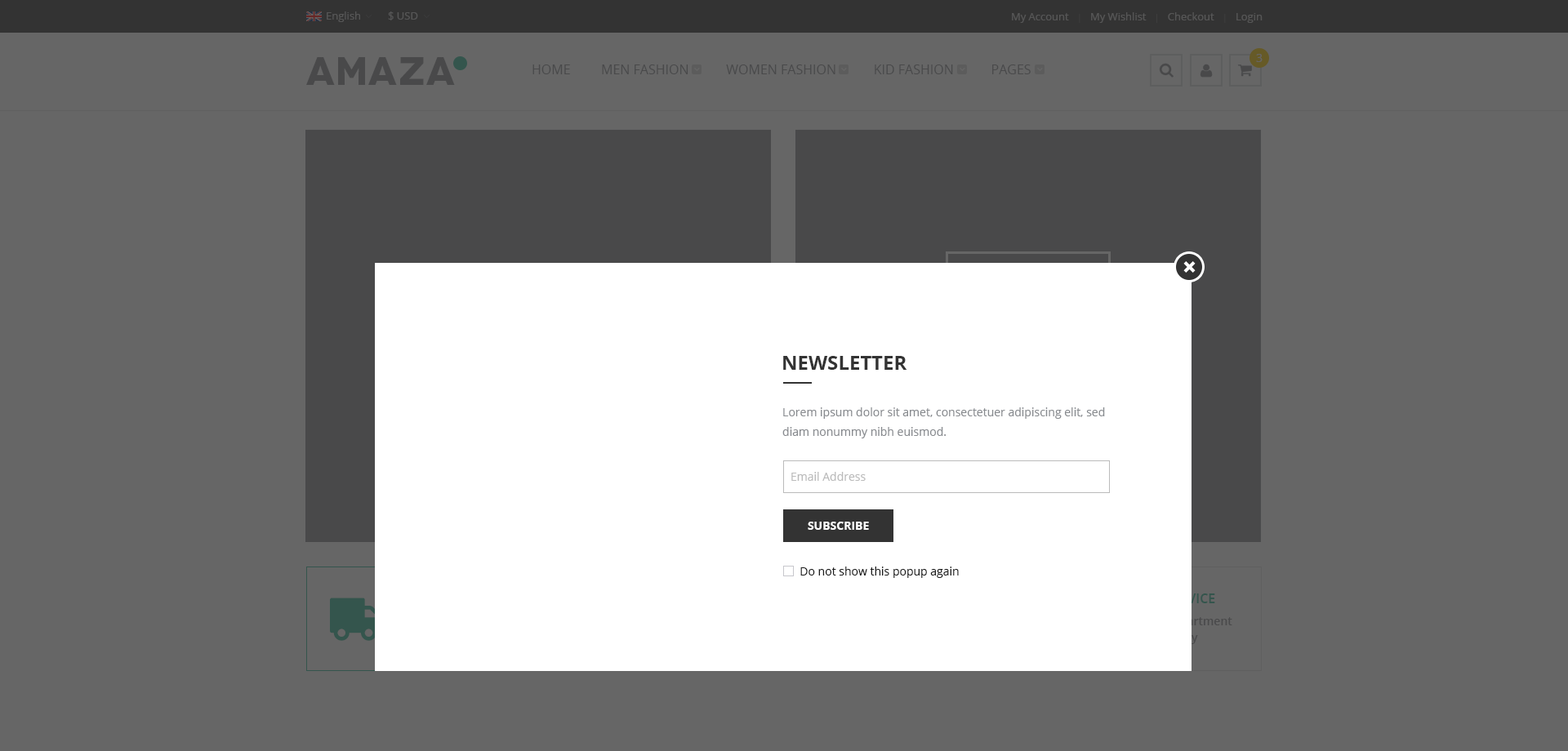
<style>
.page{position:relative;width:1568px;height:751px;background:#666666}
.page>*{position:absolute;margin:0}
.t1{font:10.6px "OpenSans";color:#565656}
.t2{font:10.6px "OpenSans";color:#bebebf}
.t3{font:9px "OpenSans";color:#595959}
.t4{font:11.4px "OpenSans";letter-spacing:0.025em;color:#666666;text-transform:uppercase}
.t5{font:39.2px "Novecentowide-Bold";letter-spacing:0.025em;color:#49494a;text-transform:uppercase}
.t6{font:13.1px "OpenSans";color:#49494a;text-transform:uppercase}
.t7{font:19.6px "OpenSans-Bold";color:#333333;text-transform:uppercase}
.t8{font:11.4px/19.6px "OpenSans";color:#898c90}
.t9{font:11.4px "OpenSans";color:#bbbbbb}
.t10{font:11.4px "OpenSans-Bold";color:#ffffff;text-transform:uppercase}
.t11{font:11.4px "OpenSans";color:#1d1d1d}
</style>
<div class="page">
<p class="t1" style="left:327px;top:11px;width:33px;height:11px">English</p>
<p class="t1" style="left:388px;top:11px;width:30px;height:9px">$ USD</p>
<p class="t2" style="left:1012px;top:12px;width:251px;height:11px">My Account   <span class="t3">|</span>   My Wishlist   <span class="t3">|</span>   Checkout   <span class="t3">| </span>  Login</p>
<p class="t4" style="left:1256px;top:54px;width:7px;height:8px">3</p>
<p class="t5" style="left:306px;top:57px;width:149px;height:28px">AMAZA</p>
<p class="t6" style="left:532px;top:65px;width:499px;height:9px">Home         Men Fashion           Women Fashion           Kid Fashion           Pages</p>
<p class="t7" style="left:783px;top:356px;width:124px;height:14px">Newsletter</p>
<p class="t8" style="left:782px;top:408px;width:323px;height:31px">Lorem ipsum dolor sit amet, consectetuer adipiscing elit, sed diam nonummy nibh euismod.</p>
<p class="t9" style="left:791px;top:472px;width:75px;height:9px">Email Address</p>
<p class="t10" style="left:808px;top:522px;width:61px;height:8px">Subscribe</p>
<p class="t11" style="left:800px;top:567px;width:159px;height:11px">Do not show this popup again</p>
</div>
